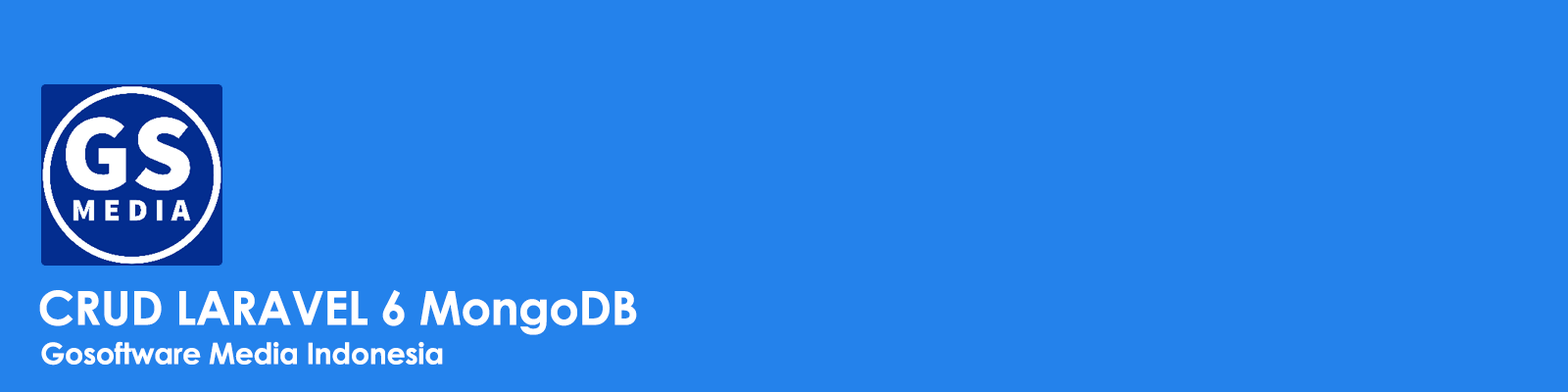
<style>
.page{position:relative;width:1568px;height:392px;background:#2482eb}
.page>*{position:absolute;margin:0}
.t1{font:47px "CenturyGothic-Bold";letter-spacing:-0.01em;color:#ffffff}
.t2{font:29.4px "CenturyGothic-Bold";letter-spacing:-0.01em;color:#ffffff}
</style>
<div class="page">
<p class="t1" style="left:39px;top:290px;width:598px;height:45px">CRUD LARAVEL 6 MongoDB</p>
<p class="t2" style="left:41px;top:341px;width:402px;height:25px">Gosoftware Media Indonesia</p>
</div>
